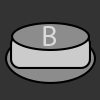
<style>
.page{position:relative;width:100px;height:100px;background:#333333}
.page>*{position:absolute;margin:0}
.t1{font:29.2px "MyriadPro-Regular";color:#dadada}
</style>
<div class="page">
<p class="t1" style="left:43px;top:26px;width:13px;height:20px">B</p>
</div>
